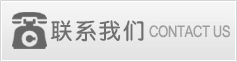
<style>
.page{position:relative;width:237px;height:62px}
.page>*{position:absolute;margin:0}
.t1{font:22px "ZhunYuan";letter-spacing:0.1em;color:#707070}
.t2{font:16px "ArialNarrow";letter-spacing:-0.025em;color:#9e9e9e}
</style>
<div class="page">
<p class="t1" style="left:50px;top:20px;width:94px;height:22px">联系我们</p>
<p class="t2" style="left:149px;top:25px;width:81px;height:13px">CONTACT US</p>
</div>
